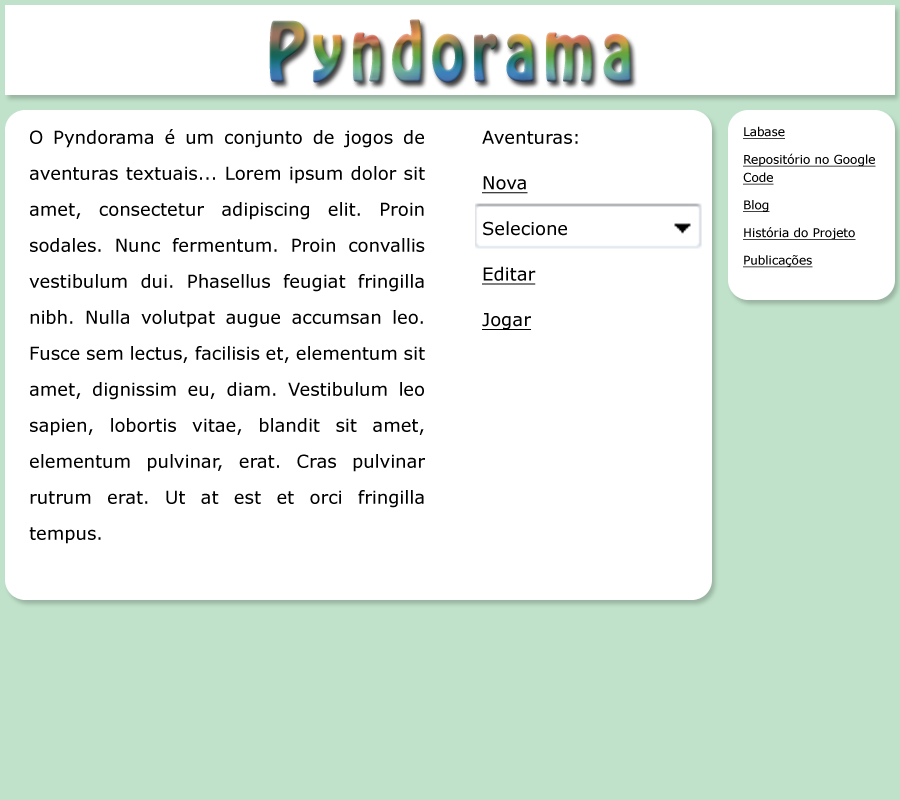
<style>
.page{position:relative;width:900px;height:800px;background:#ffffff}
.page>*{position:absolute;margin:0}
.t1{font:72px "HoboStd";letter-spacing:0.1em;font-weight:bold;scale:0.83 1}
.t2{font:12px/18px "Verdana";color:#000000;text-decoration:underline}
.t3{font:18px/36px "Verdana";color:#000000}
.t4{font:18px/36px "Verdana";color:#000000;text-decoration:underline}
</style>
<div class="page">
<p class="t1" style="left:269px;top:19px;width:362px;height:64px">Pyndorama</p>
<p class="t2" style="left:743px;top:126px;width:133px;height:142px">Labase<br>Repositório no Google Code<br>Blog<br>História do Projeto<br>Publicações</p>
<p class="t3" style="left:29px;top:129px;width:396px;height:415px;text-align:justify">O Pyndorama é um conjunto de jogos de aventuras textuais... Lorem ipsum dolor sit amet, consectetur adipiscing elit. Proin sodales. Nunc fermentum. Proin convallis vestibulum dui. Phasellus feugiat fringilla nibh. Nulla volutpat augue accumsan leo. Fusce sem lectus, facilisis et, elementum sit amet, dignissim eu, diam. Vestibulum leo sapien, lobortis vitae, blandit sit amet, elementum pulvinar, erat. Cras pulvinar rutrum erat. Ut at est et orci fringilla tempus.</p>
<p class="t4" style="left:482px;top:130px;width:96px;height:200px;text-align:justify"><span class="t3">Aventuras:<br></span>Nova<br><span class="t3">Selecione<br></span>Editar<br>Jogar</p>
</div>
